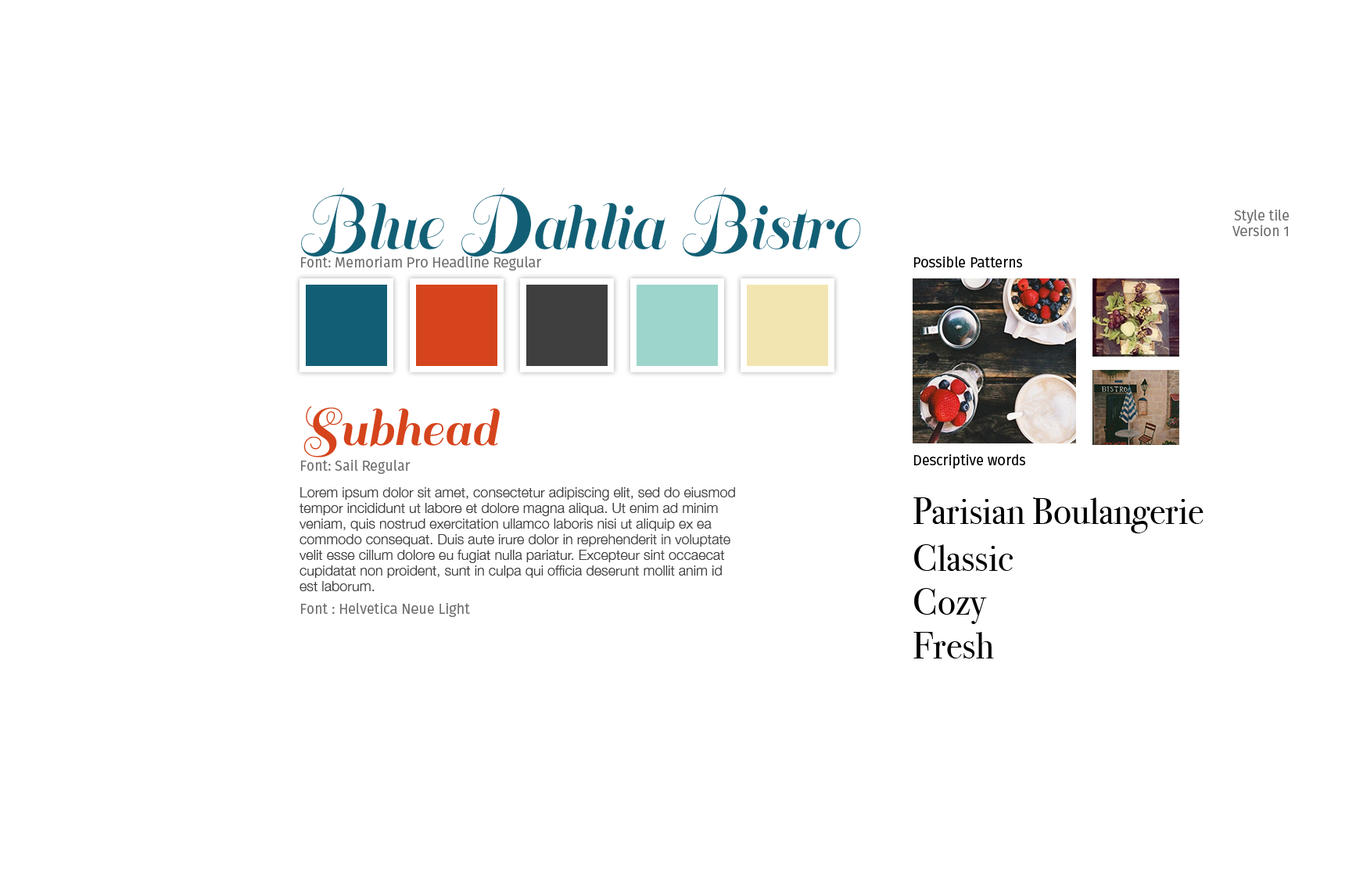
<style>
.page{position:relative;width:1356px;height:879px;background:#ffffff}
.page>*{position:absolute;margin:0}
.t1{font:56.3px "MemoriamProHeadline";color:#125f75}
.t2{font:14.1px/15.6px "FiraSans-Book";color:#706e6e}
.t3{font:14.1px "FiraSans-Book";color:#706e6e}
.t4{font:14.1px "FiraSans-Book";color:#000000}
.t5{font:56.3px "Sail-Regular";color:#d5441c}
.t6{font:14.1px/15.6px "HelveticaNeue-Light";color:#3f3f3f}
.t7{font:37.5px "BodoniSvtyTwoITCTT-Book";color:#000000}
</style>
<div class="page">
<p class="t1" style="left:301px;top:188px;width:560px;height:69px">Blue Dahlia Bistro</p>
<p class="t2" style="left:1233px;top:210px;width:56px;height:26px;text-align:right">Style tile<br>Version 1</p>
<p class="t3" style="left:301px;top:257px;width:241px;height:14px">Font: Memoriam Pro Headline Regular</p>
<p class="t4" style="left:914px;top:257px;width:108px;height:11px">Possible Patterns</p>
<p class="t5" style="left:303px;top:406px;width:197px;height:52px">Subhead</p>
<p class="t3" style="left:301px;top:460px;width:110px;height:14px">Font: Sail Regular</p>
<p class="t4" style="left:914px;top:454px;width:111px;height:15px">Descriptive words</p>
<p class="t6" style="left:299px;top:487px;width:436px;height:104px">Lorem ipsum dolor sit amet, consectetur adipiscing elit, sed do eiusmod tempor incididunt ut labore et dolore magna aliqua. Ut enim ad minim veniam, quis nostrud exercitation ullamco laboris nisi ut aliquip ex ea commodo consequat. Duis aute irure dolor in reprehenderit in voluptate velit esse cillum dolore eu fugiat nulla pariatur. Excepteur sint occaecat cupidatat non proident, sunt in culpa qui officia deserunt mollit anim id est laborum.</p>
<p class="t7" style="left:914px;top:497px;width:290px;height:36px">Parisian Boulangerie</p>
<p class="t7" style="left:914px;top:544px;width:99px;height:27px">Classic</p>
<p class="t7" style="left:914px;top:588px;width:73px;height:36px">Cozy</p>
<p class="t3" style="left:301px;top:603px;width:169px;height:14px">Font : Helvetica Neue Light</p>
<p class="t7" style="left:914px;top:632px;width:80px;height:27px">Fresh</p>
</div>
